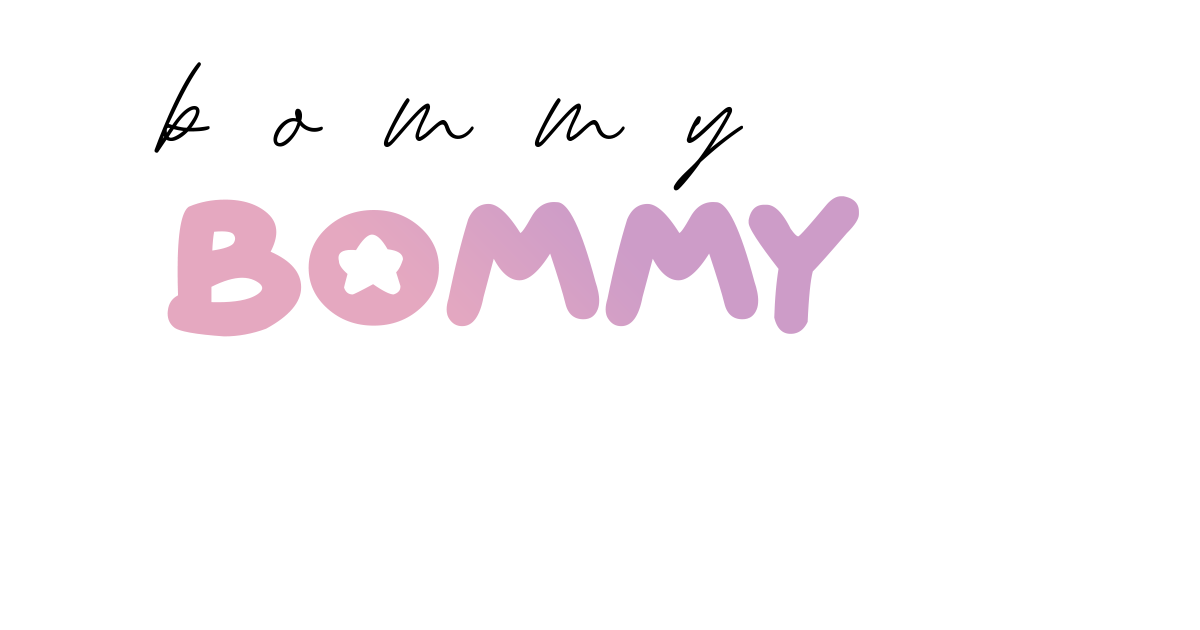
<style>
.page{position:relative;width:1200px;height:630px;background:#ffffff}
.page>*{position:absolute;margin:0}
.t1{font:120px "August-July";color:#000000}
.t2{font:150px "Starborn";color:#daa3c4}
</style>
<div class="page">
<p class="t1" style="left:154px;top:62px;width:589px;height:129px">b  o  m  m  y</p>
<p class="t2" style="left:167px;top:196px;width:692px;height:141px">bommy</p>
</div>
